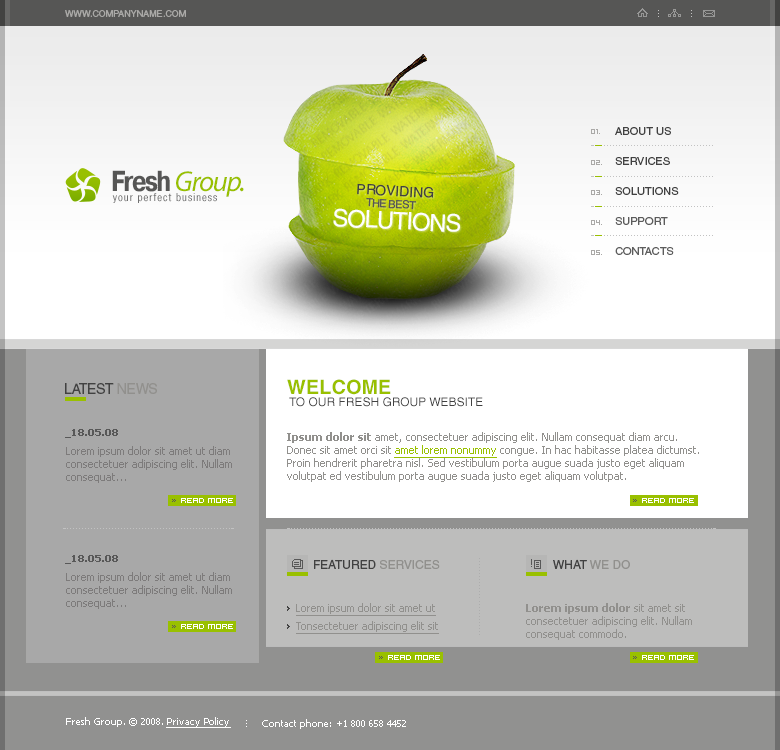
<style>
.page{position:relative;width:780px;height:750px}
.page>*{position:absolute;margin:0}
.t1{font:9px "Helvetica";color:#aaa9a7;text-transform:uppercase}
.t2{font:8px "hooge05_55Cyr2";color:#aaa9a7}
.t3{font:11px "Helvetica";color:#414141}
.t4{font:29px "MyriadPro-It";letter-spacing:-0.05em;color:#99c000}
.t5{font:29px "PragmaticaCondC-Bold";letter-spacing:-0.05em;color:#565655}
.t6{font:14px "Helvetica";color:#414141}
.t7{font:11px "PragmaticaCondC";letter-spacing:0.1em;color:#707070}
.t8{font:11px "Helvetica";letter-spacing:-0.05em;color:#565655}
.t9{font:24px "Helvetica";letter-spacing:-0.05em;color:#ffffff}
.t10{font:11px "Helvetica";color:#5c5c5c}
.t11{font:11px "Helvetica";color:#5d5d5d}
.t12{font:14px "Helvetica";letter-spacing:-0.025em;color:#414141}
.t13{font:14px "Helvetica";letter-spacing:-0.025em;color:#91908d}
.t14{font:20px "Helvetica-Bold";color:#99c000;text-transform:uppercase}
.t15{font:12px "Helvetica";color:#414141;text-transform:uppercase}
.t16{font:10px "Tahoma-Bold";color:#585858}
.t17{font:11px/13px "Tahoma";color:#91908d}
.t18{font:11px/13px "Tahoma-Bold";color:#91908d}
.t19{font:11px/13px "Tahoma";color:#99c000;text-decoration:underline}
.t20{font:11px/13px "Tahoma";color:#7d7b7b}
.t21{font:8px "Hooge0853";color:#ffffff}
.t22{font:12px "Helvetica";color:#414141}
.t23{font:12px "Helvetica";color:#91908d}
.t24{font:11px/18px "Tahoma";color:#91908d;text-decoration:underline}
.t25{font:10px "Tahoma";color:#ffffff}
.t26{font:10px "Tahoma";color:#ffffff;text-decoration:underline}
</style>
<div class="page">
<p class="t1" style="left:65px;top:10px;width:121px;height:7px">www.companyname.com</p>
<p class="t2" style="left:591px;top:129px;width:9px;height:5px">01.</p>
<p class="t3" style="left:615px;top:127px;width:56px;height:8px">ABOUT US</p>
<p class="t2" style="left:591px;top:160px;width:11px;height:5px">02.</p>
<p class="t3" style="left:615px;top:157px;width:55px;height:8px">SERVICES</p>
<p class="t4" style="left:112px;top:170px;width:132px;height:27px"><span class="t5">Fresh </span>Group.</p>
<p class="t6" style="left:357px;top:183px;width:77px;height:15px;rotate:3deg">PROVIDING</p>
<p class="t7" style="left:112px;top:193px;width:105px;height:10px">your perfect business</p>
<p class="t8" style="left:366px;top:198px;width:50px;height:12px;rotate:3deg">THE BEST</p>
<p class="t2" style="left:591px;top:190px;width:11px;height:5px">03.</p>
<p class="t3" style="left:615px;top:187px;width:64px;height:8px">SOLUTIONS</p>
<p class="t9" style="left:333px;top:208px;width:127px;height:24px;rotate:3deg">SOLUTIONS</p>
<p class="t2" style="left:591px;top:220px;width:11px;height:5px">04.</p>
<p class="t10" style="left:615px;top:217px;width:53px;height:8px">SUPPORT</p>
<p class="t2" style="left:591px;top:250px;width:11px;height:5px">05.</p>
<p class="t11" style="left:615px;top:247px;width:59px;height:8px">CONTACTS</p>
<p class="t12" style="left:65px;top:383px;width:92px;height:11px">LATEST <span class="t13">NEWS</span></p>
<p class="t14" style="left:287px;top:379px;width:104px;height:16px">WELCOME</p>
<p class="t15" style="left:289px;top:397px;width:194px;height:10px">to our Fresh Group WEBSITE</p>
<p class="t16" style="left:65px;top:429px;width:53px;height:9px">_18.05.08</p>
<p class="t17" style="left:287px;top:432px;width:412px;height:50px"><span class="t18">Ipsum dolor sit</span> amet, consectetuer adipiscing elit. Nullam consequat diam arcu. Donec sit amet orci sit <span class="t19">amet lorem nonummy</span> congue. In hac habitasse platea dictumst. Proin hendrerit pharetra nisl. Sed vestibulum porta augue suada justo eget aliquam volutpat ed vestibulum porta augue suada justo eget aliquam volutpat.</p>
<p class="t20" style="left:66px;top:446px;width:166px;height:37px">Lorem ipsum dolor sit amet ut diam consectetuer adipiscing elit. Nullam consequat...</p>
<p class="t21" style="left:181px;top:498px;width:52px;height:5px">read more</p>
<p class="t21" style="left:642px;top:498px;width:52px;height:5px">read more</p>
<p class="t16" style="left:65px;top:555px;width:53px;height:9px">_18.05.08</p>
<p class="t22" style="left:314px;top:559px;width:126px;height:10px">FEATURED <span class="t23">SERVICES</span></p>
<p class="t23" style="left:553px;top:559px;width:77px;height:10px"><span class="t22">WHAT </span>WE DO</p>
<p class="t20" style="left:66px;top:572px;width:166px;height:37px">Lorem ipsum dolor sit amet ut diam consectetuer adipiscing elit. Nullam consequat...</p>
<p class="t24" style="left:296px;top:603px;width:143px;height:31px">Lorem ipsum dolor sit amet ut Tonsectetuer adipiscing elit sit</p>
<p class="t17" style="left:526px;top:603px;width:166px;height:37px"><span class="t18">Lorem ipsum dolor</span> sit amet sit consectetuer adipiscing elit. Nullam consequat commodo.</p>
<p class="t21" style="left:181px;top:624px;width:52px;height:5px">read more</p>
<p class="t21" style="left:388px;top:655px;width:52px;height:5px">read more</p>
<p class="t21" style="left:642px;top:655px;width:52px;height:5px">read more</p>
<p class="t25" style="left:66px;top:717px;width:165px;height:11px">Fresh Group. © 2008. <span class="t26">Privacy Policy</span></p>
<p class="t25" style="left:262px;top:719px;width:144px;height:10px">Contact phone: +1 800 658 4452</p>
</div>
